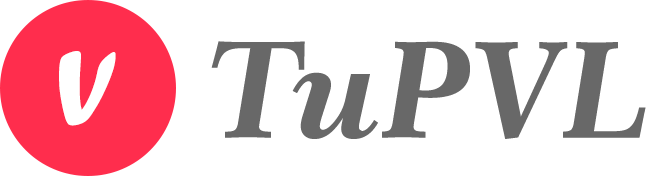
<style>
.page{position:relative;width:651px;height:178px;background:#ffffff}
.page>*{position:absolute;margin:0}
.t1{font:133.3px "Century751BT-BoldItalicB";letter-spacing:0.01em;color:#686868}
.t2{font:111.2px "ForteMT";letter-spacing:0.029em;color:#ffffff}
</style>
<div class="page">
<p class="t1" style="left:211px;top:41px;width:435px;height:98px">TuPVL</p>
<p class="t2" style="left:59px;top:51px;width:57px;height:75px">V</p>
</div>
